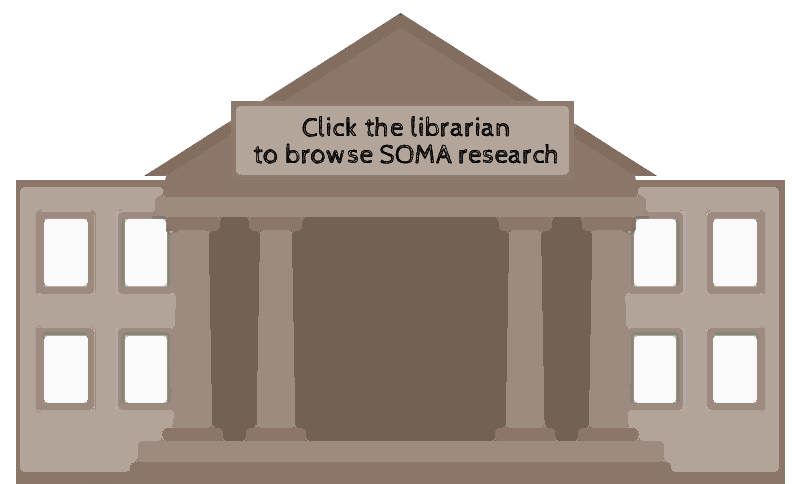
<style>
.page{position:relative;width:800px;height:484px;background:#ffffff}
.page>*{position:absolute;margin:0}
.t1{font:27.6px/27.6px "CabinSketch-Regular";color:#000000}
</style>
<div class="page">
<p class="t1" style="left:253px;top:116px;width:304px;height:48px;text-align:center">Click the librarian <br>to browse SOMA research</p>
<p class="t1" style="left:253px;top:116px;width:304px;height:48px;text-align:center">Click the librarian <br>to browse SOMA research</p>
</div>
